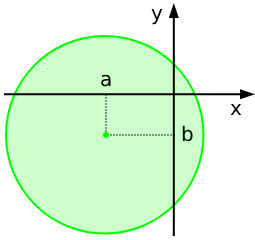
<style>
.page{position:relative;width:255px;height:240px;background:#ffffff}
.page>*{position:absolute;margin:0}
.t1{font:20px "DejaVuSans";color:#000000}
</style>
<div class="page">
<p class="t1" style="left:151px;top:9px;width:12px;height:16px">y</p>
<p class="t1" style="left:101px;top:74px;width:10px;height:13px">a</p>
<p class="t1" style="left:230px;top:104px;width:12px;height:11px">x</p>
<p class="t1" style="left:182px;top:125px;width:11px;height:17px">b</p>
</div>
